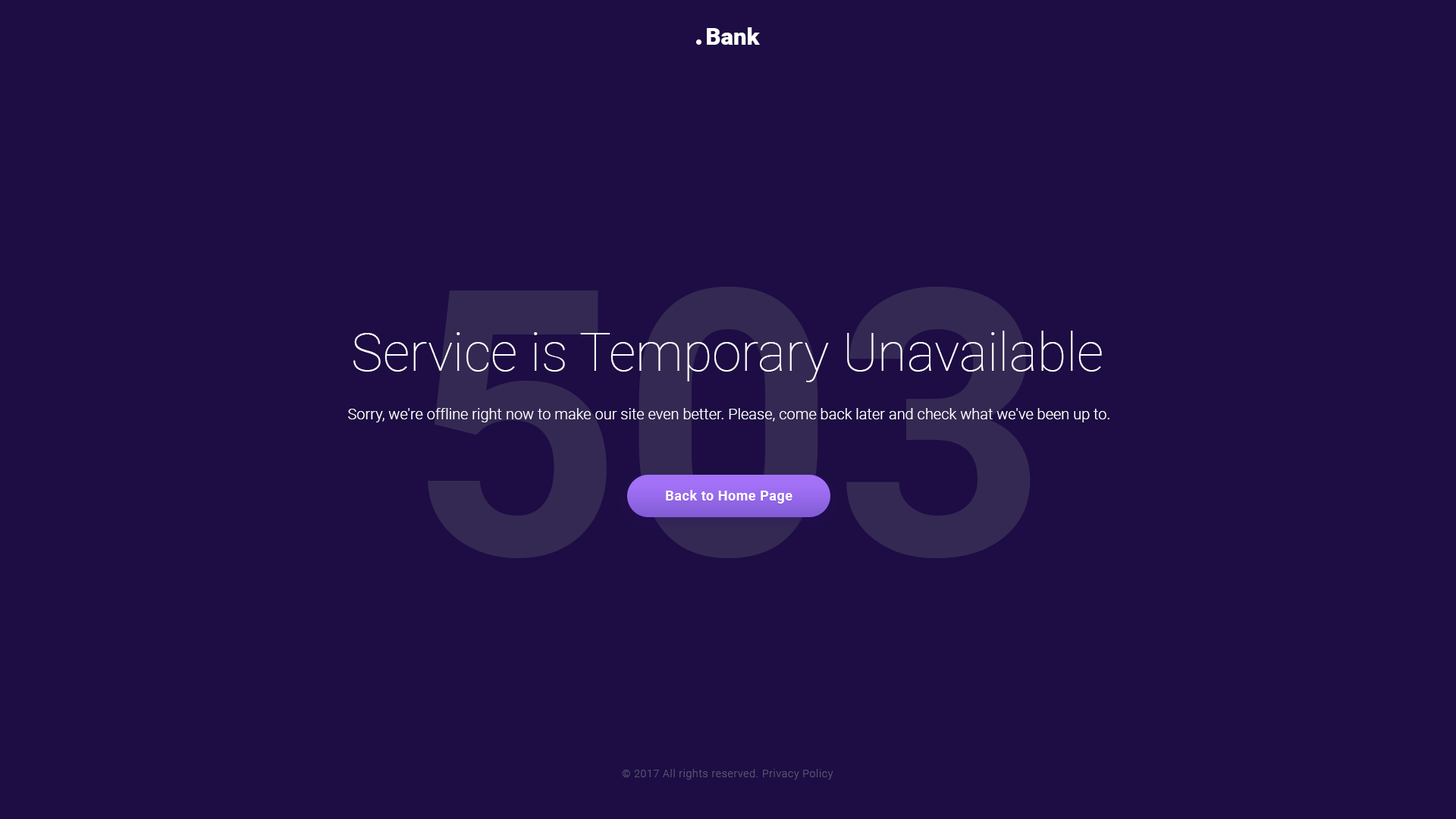
<style>
.page{position:relative;width:1456px;height:819px;background:#1d0d44}
.page>*{position:absolute;margin:0}
.t1{font:22.7px "Roboto-Black";color:#ffffff;scale:1.04 1}
.t2{font:53.1px "Roboto-Thin";color:#ffffff}
.t3{font:15.2px "Roboto-Light";color:#ffffff}
.t4{font:13.6px "Roboto-Bold";letter-spacing:0.03em;color:#ffffff}
.t5{font:10.6px "Roboto-Light";letter-spacing:0.05em;color:#585471}
</style>
<div class="page">
<p class="t1" style="left:707px;top:27px;width:53px;height:18px">Bank</p>
<p class="t2" style="left:353px;top:331px;width:749px;height:51px">Service is Temporary Unavailable</p>
<p class="t3" style="left:348px;top:408px;width:761px;height:14px">Sorry, we're offline right now to make our site even better. Please, come back later and check what we've been up to.</p>
<p class="t4" style="left:666px;top:490px;width:126px;height:14px">Back to Home Page</p>
<p class="t5" style="left:622px;top:769px;width:211px;height:11px">© 2017 All rights reserved. Privacy Policy</p>
</div>
